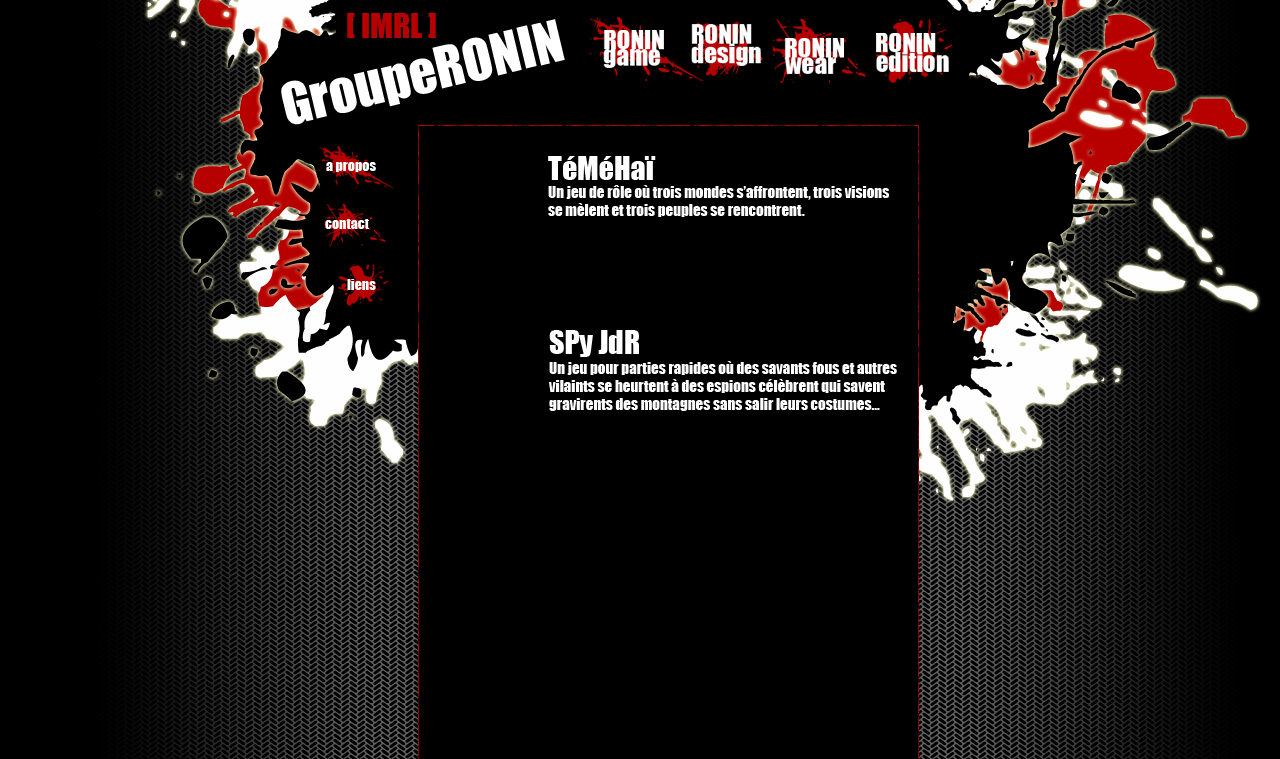
<style>
.page{position:relative;width:1280px;height:759px;background:#000000}
.page>*{position:absolute;margin:0}
.t1{font:32px "Impact";color:#b70000}
.t2{font:53px "Impact";color:#ffffff}
.t3{font:238px "Splitsplatsplodge"}
.t4{font:30px "Impact";color:#ffffff}
.t5{font:15px "Impact";color:#ffffff}
.t6{font:220px "Splitsplatsplodge"}
.t7{font:91px "Splitsplatsplodge";color:#000000}
</style>
<div class="page">
<p class="t1" style="left:347px;top:13px;width:89px;height:25px">[ IMRL ]</p>
<p class="t2" style="left:281px;top:19px;width:284px;height:106px;rotate:-13deg">GroupeRONIN</p>
<p class="t3" style="left:213px;top:154px;width:326px;height:309px">q</p>
<p class="t4" style="left:548px;top:156px;width:108px;height:24px">TéMéHaï</p>
<p class="t5" style="left:548px;top:185px;width:341px;height:32px">Un jeu de rôle où trois mondes s’affrontent, trois visions<br>se mèlent et trois peuples se rencontrent.</p>
<p class="t6" style="left:763px;top:177px;width:358px;height:351px">h</p>
<p class="t7" style="left:888px;top:306px;width:125px;height:119px">q</p>
<p class="t4" style="left:549px;top:330px;width:90px;height:27px">SPy JdR</p>
<p class="t5" style="left:549px;top:361px;width:348px;height:50px;text-align:justify">Un jeu pour parties rapides où des savants fous et autres<br>vilaints se heurtent à des espions célèbrent qui savent <br>gravirents des montagnes sans salir leurs costumes...</p>
</div>
